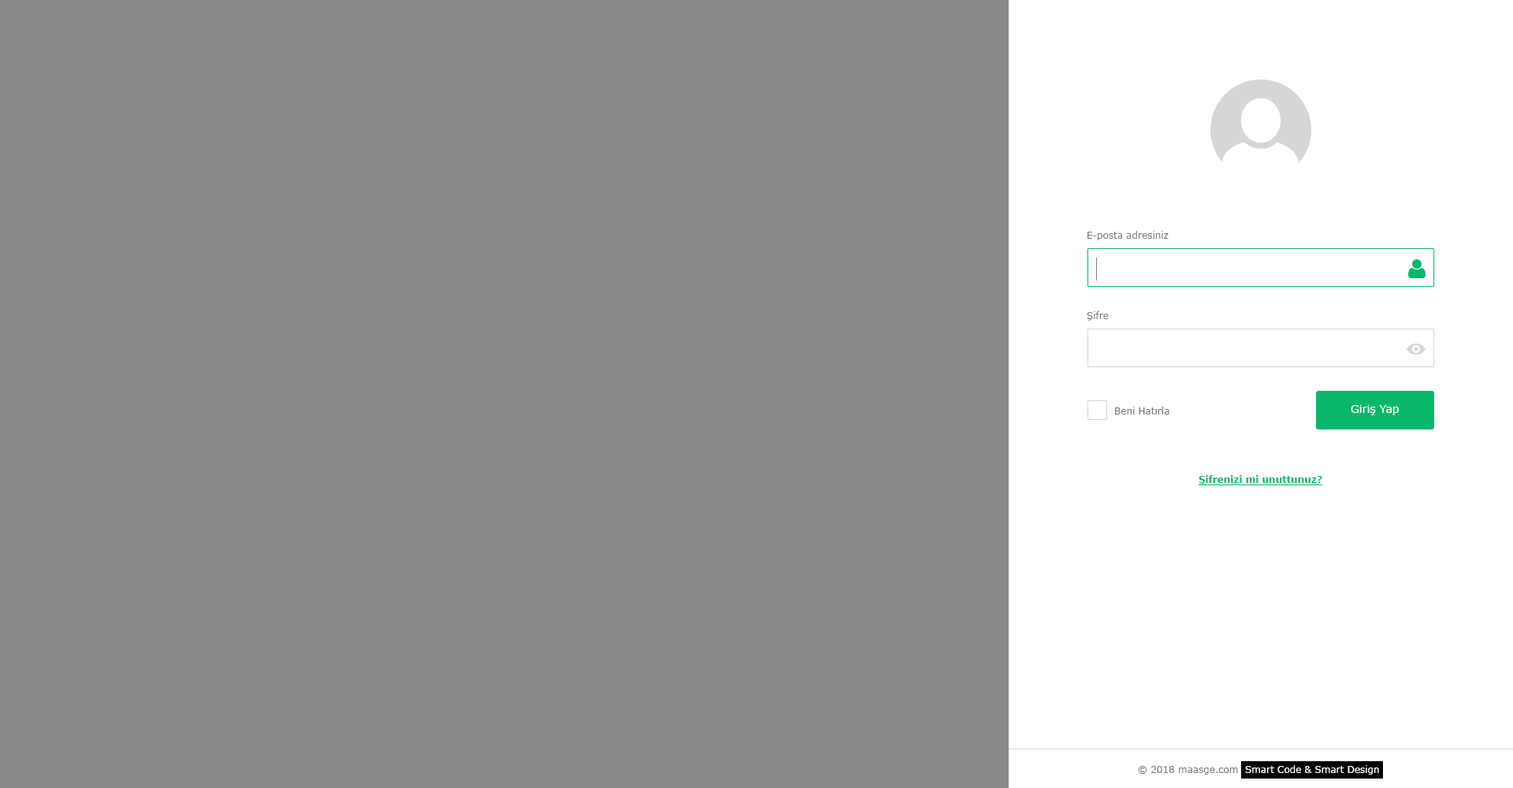
<style>
.page{position:relative;width:1513px;height:788px;background:#898989}
.page>*{position:absolute;margin:0}
.t1{font:9.5px "Verdana";color:#7d7d7d}
.t2{font:11px "Verdana";color:#ffffff}
.t3{font:9.5px "Verdana-Bold";color:#09b76b;text-decoration:underline}
</style>
<div class="page">
<p class="t1" style="left:1088px;top:231px;width:81px;height:9px">E-posta adresiniz</p>
<p class="t1" style="left:1087px;top:311px;width:22px;height:10px">Şifre</p>
<p class="t1" style="left:1115px;top:407px;width:54px;height:8px">Beni Hatırla</p>
<p class="t2" style="left:1351px;top:405px;width:48px;height:10px">Giriş Yap</p>
<p class="t3" style="left:1199px;top:475px;width:124px;height:10px">Şifrenizi mi unuttunuz?</p>
</div>
